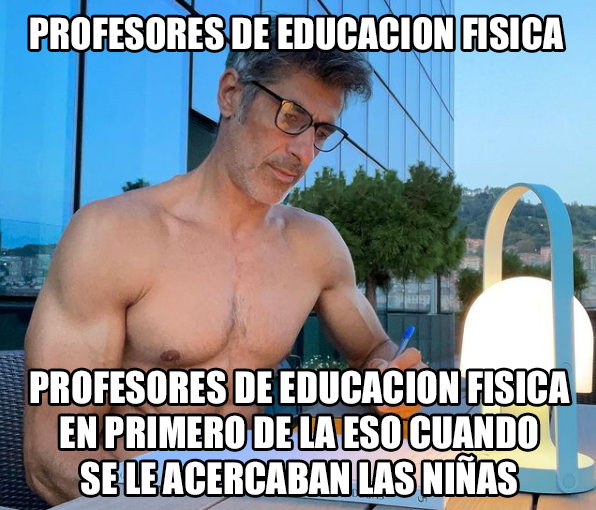
<style>
.page{position:relative;width:596px;height:510px}
.page>*{position:absolute;margin:0}
.t1{font:39.5px "Impact";color:#ffffff}
.t2{font:40px "Impact";color:#ffffff}
</style>
<div class="page">
<p class="t1" style="left:30px;top:17px;width:534px;height:33px">PROFESORES DE EDUCACION FISICA</p>
<p class="t2" style="left:30px;top:370px;width:540px;height:125px;text-align:center">PROFESORES DE EDUCACION FISICA<br>EN PRIMERO DE LA ESO CUANDO<br>SE LE ACERCABAN LAS NIÑAS</p>
</div>
